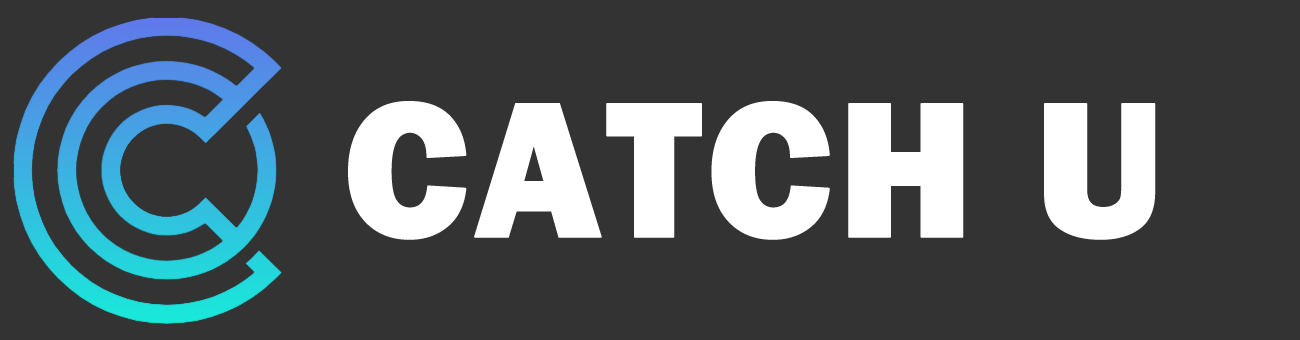
<style>
.page{position:relative;width:1300px;height:340px;background:#333333}
.page>*{position:absolute;margin:0}
.t1{font:200px "FranklinGothic-Heavy";color:#ffffff;font-weight:bold}
</style>
<div class="page">
<p class="t1" style="left:348px;top:101px;width:808px;height:139px">CATCH U</p>
</div>
